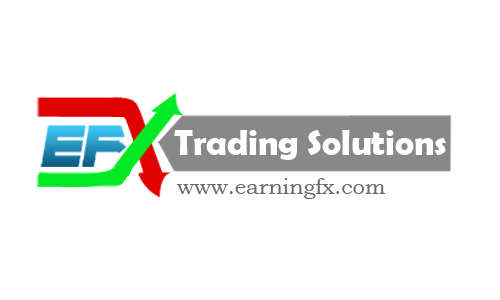
<style>
.page{position:relative;width:500px;height:300px;background:#ffffff}
.page>*{position:absolute;margin:0}
.t1{font:35.7px "BerlinSansFBDemi-Bold";color:#fffefe}
.t2{font:21.7px "BookmanOldStyle";color:#6d6b6b}
</style>
<div class="page">
<p class="t1" style="left:174px;top:130px;width:272px;height:30px">Trading Solutions</p>
<p class="t2" style="left:176px;top:178px;width:210px;height:21px">www.earningfx.com</p>
</div>
